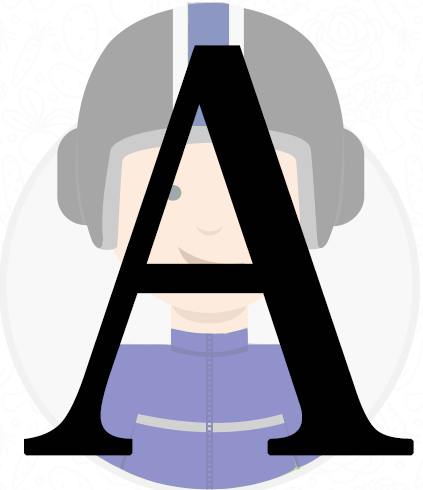
<style>
.page{position:relative;width:423px;height:490px}
.page>*{position:absolute;margin:0}
.t1{font:700.1px "Perpetua";letter-spacing:0.025em;color:#010101;font-weight:bold}
</style>
<div class="page">
<p class="t1" style="left:24px;top:45px;width:390px;height:411px">A</p>
</div>
